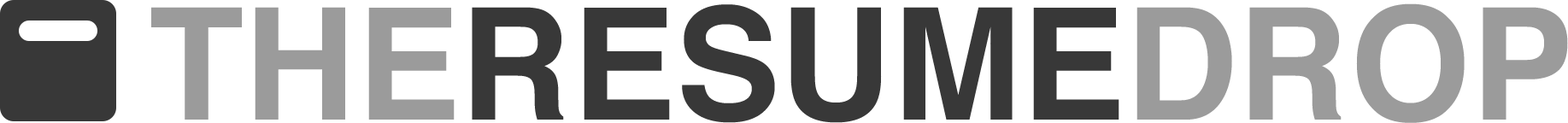
<style>
.page{position:relative;width:1568px;height:123px;background:#ffffff}
.page>*{position:absolute;margin:0}
.t1{font:155.5px "Helvetica-Bold";color:#383838}
.t2{font:155.5px "Helvetica-Bold";color:#9b9b9b}
</style>
<div class="page">
<p class="t1" style="left:151px;top:3px;width:1417px;height:120px"><span class="t2">THE</span>RESUME<span class="t2">DROP</span></p>
</div>
